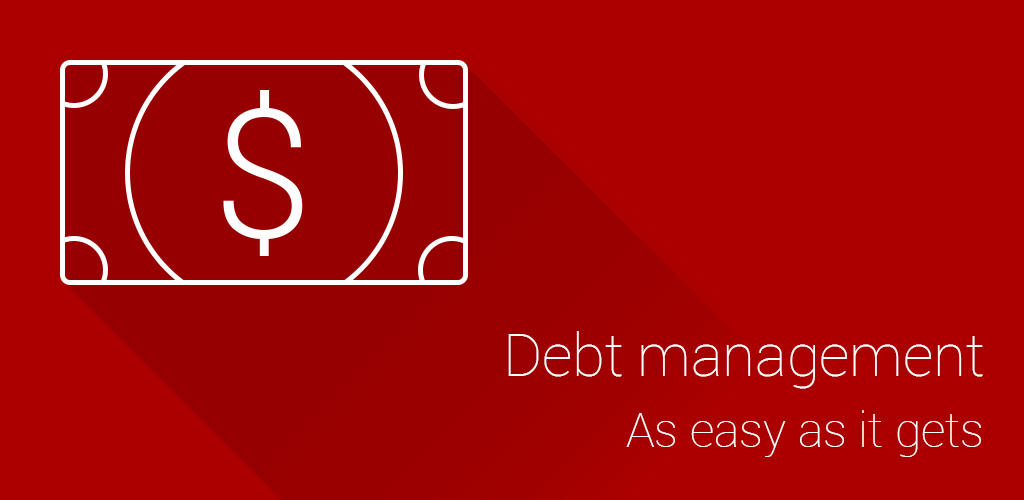
<style>
.page{position:relative;width:1024px;height:500px;background:#aa0000}
.page>*{position:absolute;margin:0}
.t1{font:60.4px "Roboto-Thin";color:#ffffff}
.t2{font:48px "Roboto-Thin";color:#ffffff}
</style>
<div class="page">
<p class="t1" style="left:508px;top:331px;width:475px;height:58px">Debt management</p>
<p class="t2" style="left:626px;top:410px;width:355px;height:47px">As easy as it gets</p>
</div>
